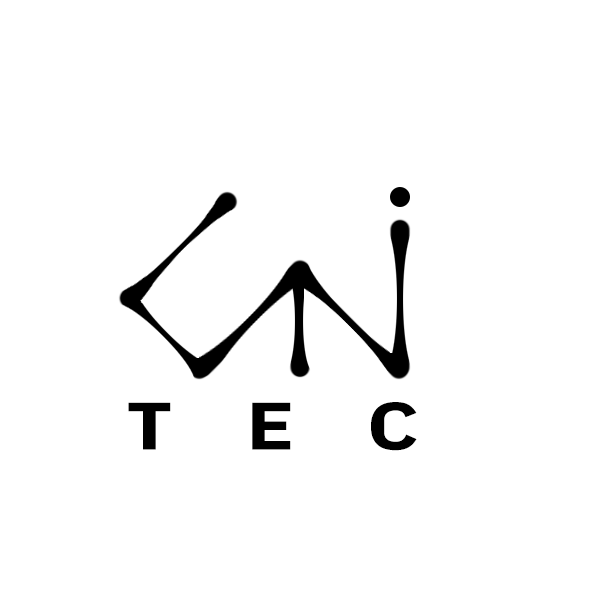
<style>
.page{position:relative;width:600px;height:600px;background:#ffffff}
.page>*{position:absolute;margin:0}
.t1{font:67px "IBMPlexSansCond-Bold";letter-spacing:0.86em;color:#000000;text-transform:uppercase;scale:1.31 1}
</style>
<div class="page">
<p class="t1" style="left:128px;top:402px;width:289px;height:49px">TEC</p>
</div>
